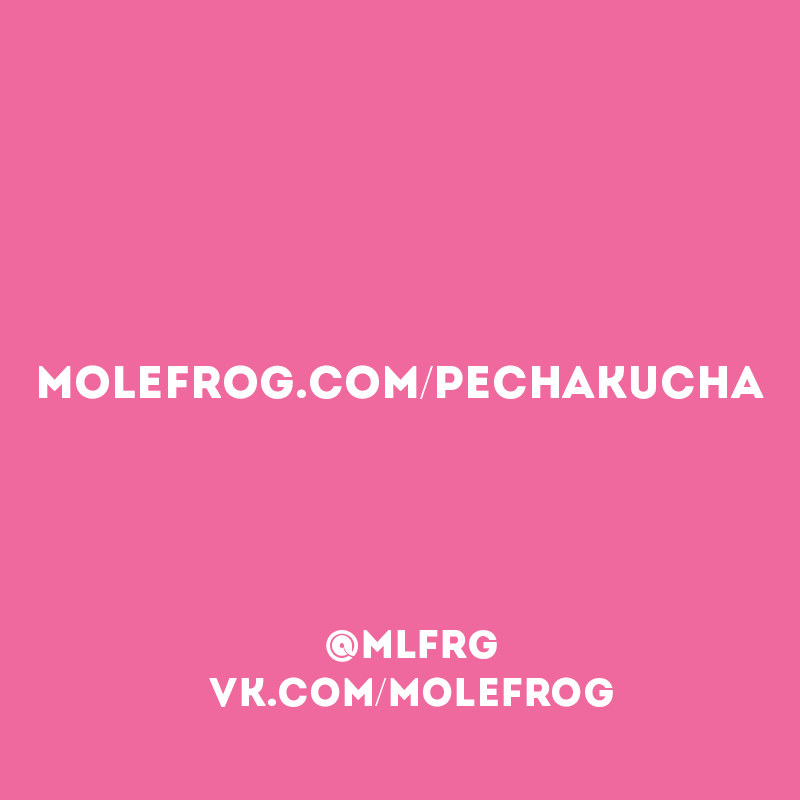
<style>
.page{position:relative;width:800px;height:800px;background:#ef689e}
.page>*{position:absolute;margin:0}
.t1{font:45.8px "Intro";color:#ffffff}
.t2{font:45.8px "TimesNewRomanPSMT";color:#ffffff}
.t3{font:40px "Intro";color:#ffffff}
.t4{font:40px "TimesNewRomanPSMT";color:#ffffff}
</style>
<div class="page">
<p class="t1" style="left:39px;top:365px;width:725px;height:34px">molefrog.com<span class="t2">/</span>pechakucha</p>
<p class="t3" style="left:209px;top:630px;width:404px;height:77px;text-align:center">@mlfrg<br>vk.com<span class="t4">/</span>molefrog</p>
</div>
